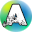
<style>
.page{position:relative;width:32px;height:32px;background:#ffffff}
.page>*{position:absolute;margin:0}
.t1{font:26.5px "C.A.Gatintas";color:#ffffff}
</style>
<div class="page">
<p class="t1" style="left:2px;top:4px;width:25px;height:23px">A</p>
</div>
